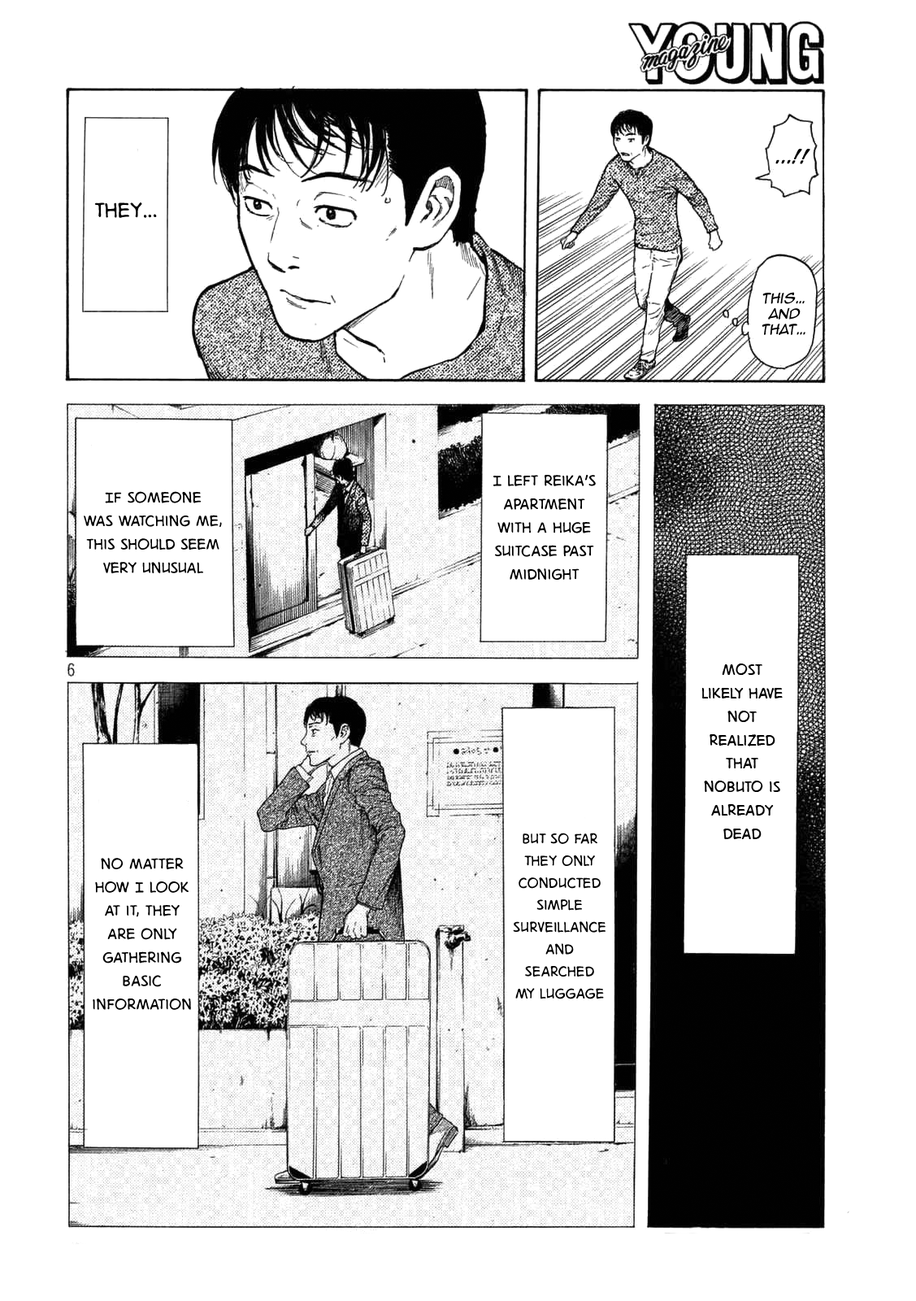
<style>
.page{position:relative;width:916px;height:1301px;background:#ffffff}
.page>*{position:absolute;margin:0}
.t1{font:15.2px "AnimeAce2.0BB-Bold";color:#000000}
.t2{font:27.1px "DigitalStrip.BB";color:#000000}
.t3{font:13px "AnimeAce2.0BB";color:#000000;font-style:italic}
.t4{font:19.5px "DigitalStrip.BB";color:#000000}
.t5{font:18.4px "DigitalStrip.BB";color:#000000}
</style>
<div class="page">
<p class="t1" style="left:776px;top:149px;width:35px;height:15px">...!!</p>
<p class="t2" style="left:94px;top:202px;width:63px;height:16px">They…</p>
<p class="t3" style="left:762px;top:292px;width:44px;height:43px;text-align:center">This… And that…</p>
<p class="t4" style="left:494px;top:475px;width:102px;height:105px;text-align:center">I left Reika’s apartment with a huge suitcase past midnight</p>
<p class="t4" style="left:84px;top:491px;width:138px;height:82px;text-align:center">If someone <br>was watching me, <br>this should seem <br>very unusual</p>
<p class="t4" style="left:702px;top:664px;width:81px;height:175px;text-align:center">Most <br>likely have not realized that Nobuto is already dead</p>
<p class="t5" style="left:513px;top:833px;width:93px;height:166px;text-align:center">But so far they only conducted simple surveillance and searched <br>my luggage</p>
<p class="t4" style="left:93px;top:858px;width:98px;height:152px;text-align:center">No matter how I look at it, they <br>are only gathering basic information</p>
</div>
